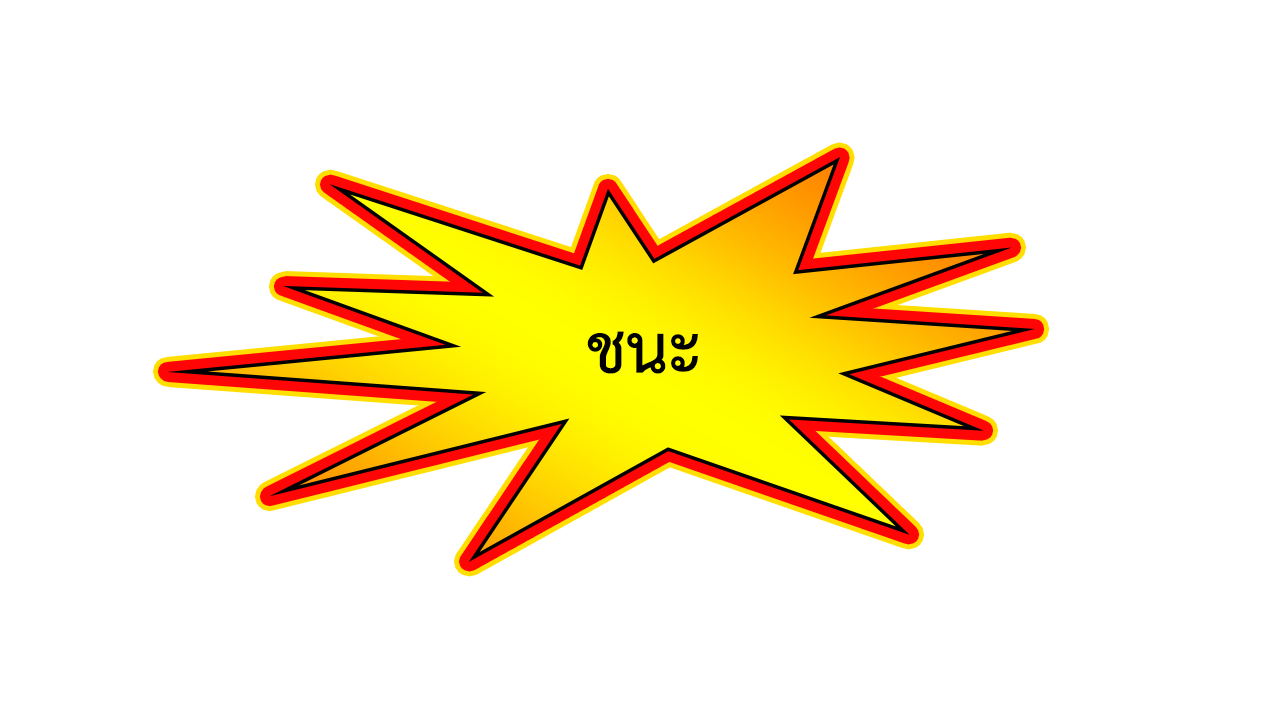
<style>
.page{position:relative;width:1280px;height:720px;background:#ffffff}
.page>*{position:absolute;margin:0}
.t1{font:97.2px "THSarabunPSK-Bold";color:#000000}
</style>
<div class="page">
<p class="t1" style="left:587px;top:331px;width:111px;height:43px">ชนะ</p>
</div>
